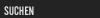
<style>
.page{position:relative;width:100px;height:18px;background:#232323}
.page>*{position:absolute;margin:0}
.t1{font:12px "AlternateGothicNo2BT-Regular";color:#e5e5e5;text-transform:uppercase}
</style>
<div class="page">
<p class="t1" style="left:4px;top:6px;width:30px;height:9px">Suchen</p>
</div>
